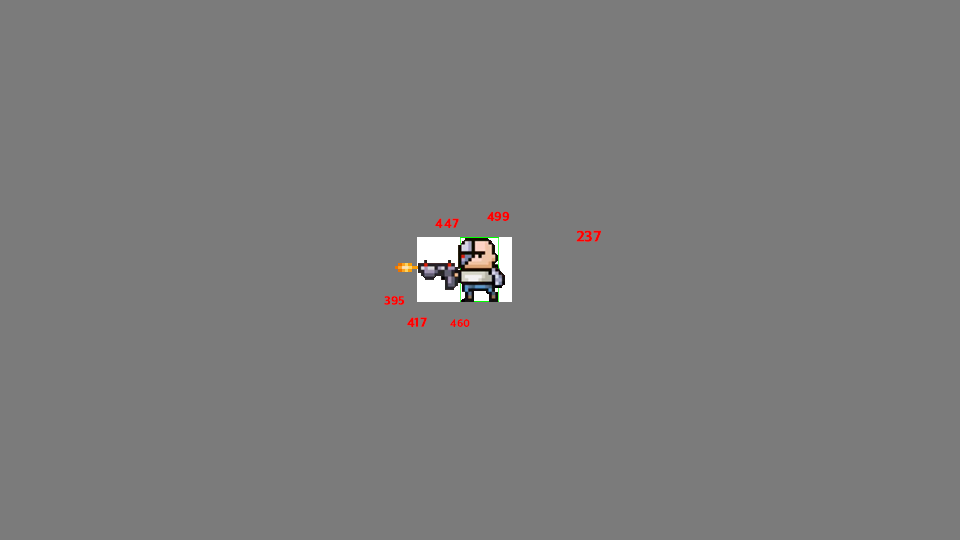
<style>
.page{position:relative;width:960px;height:540px;background:#7b7b7b}
.page>*{position:absolute;margin:0}
.t1{font:12.8px "AppleSDGothicNeo-ExtraBold";color:#ff0000;font-weight:bold}
.t2{font:12.5px "AppleSDGothicNeo-ExtraBold";color:#ff0000;font-weight:bold}
.t3{font:15.4px "AppleSDGothicNeo-ExtraBold";color:#ff0000;font-weight:bold}
.t4{font:12px "AppleSDGothicNeo-ExtraBold";color:#ff0000;font-weight:bold}
.t5{font:12.9px "AppleSDGothicNeo-ExtraBold";color:#ff0000;font-weight:bold}
.t6{font:10.5px "AppleSDGothicNeo-ExtraBold";color:#ff0000;font-weight:bold}
</style>
<div class="page">
<p class="t1" style="left:435px;top:218px;width:24px;height:10px">447</p>
<p class="t2" style="left:487px;top:211px;width:23px;height:10px">499</p>
<p class="t3" style="left:576px;top:230px;width:25px;height:12px">237</p>
<p class="t4" style="left:384px;top:296px;width:21px;height:9px">395</p>
<p class="t5" style="left:407px;top:317px;width:20px;height:10px">417</p>
<p class="t6" style="left:450px;top:319px;width:20px;height:8px">460</p>
</div>
